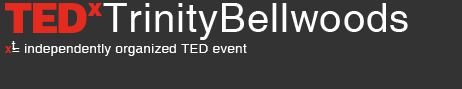
<style>
.page{position:relative;width:462px;height:89px;background:#333333}
.page>*{position:absolute;margin:0}
.t1{font:40px "Helvetica-Black";letter-spacing:0.025em;color:#e62b1e}
.t2{font:23.3px "Helvetica-Black";letter-spacing:0.025em;color:#e62b1e}
.t3{font:40px "Helvetica";letter-spacing:0.025em;color:#ffffff}
.t4{font:13.3px "Helvetica";letter-spacing:0.025em;color:#ffffff}
.t5{font:13.3px "Helvetica";letter-spacing:0.025em;color:#e62b1e}
</style>
<div class="page">
<p class="t1" style="left:5px;top:3px;width:27px;height:30px">T</p>
<p class="t1" style="left:33px;top:3px;width:24px;height:30px">E</p>
<p class="t1" style="left:58px;top:3px;width:29px;height:30px">D</p>
<p class="t2" style="left:87px;top:3px;width:15px;height:13px">x</p>
<p class="t3" style="left:103px;top:3px;width:305px;height:37px">TrinityBellwoods</p>
<p class="t4" style="left:11px;top:41px;width:5px;height:9px">t</p>
<p class="t4" style="left:5px;top:44px;width:242px;height:12px"><span class="t5">x</span>= independently organized TED event</p>
</div>
